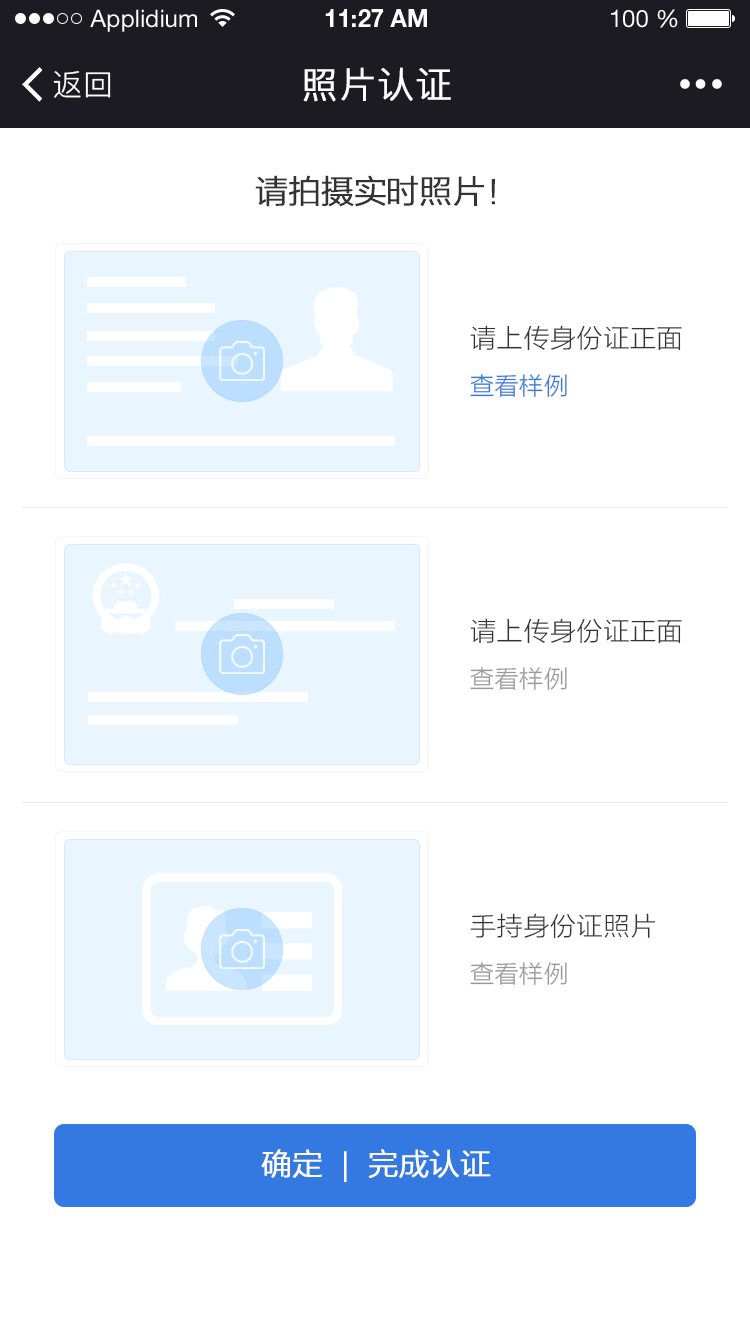
<style>
.page{position:relative;width:750px;height:1334px;background:#ffffff}
.page>*{position:absolute;margin:0}
.t1{font:24px "HelveticaNeueLTStd-Roman";color:#ffffff}
.t2{font:24px "HelveticaNeueLTStd-Bd";color:#ffffff}
.t3{font:30px "PingFang-SC-Regular";letter-spacing:0.025em;color:#ffffff}
.t4{font:36px "PingFang-SC-Regular";letter-spacing:0.025em;color:#ffffff;font-weight:bold}
.t5{font:32px "FZLTXHK--GBK1-0";color:#333333;font-weight:bold}
.t6{font:26px "FZLTXHK--GBK1-0";letter-spacing:0.025em;color:#333333}
.t7{font:24px "FZLTXHK--GBK1-0";letter-spacing:0.025em;color:#3479e1}
.t8{font:24px "FZLTXHK--GBK1-0";letter-spacing:0.025em;color:#999999}
.t9{font:30px "FZLTXHK--GBK1-0";color:#ffffff;font-weight:bold}
</style>
<div class="page">
<p class="t1" style="left:90px;top:9px;width:107px;height:23px">Applidium</p>
<p class="t2" style="left:325px;top:9px;width:102px;height:18px">11:27 AM</p>
<p class="t1" style="left:611px;top:9px;width:67px;height:19px">100 %</p>
<p class="t3" style="left:53px;top:71px;width:58px;height:27px">返回</p>
<p class="t4" style="left:303px;top:67px;width:148px;height:35px">照片认证</p>
<p class="t5" style="left:255px;top:175px;width:240px;height:32px">请拍摄实时照片！</p>
<p class="t6" style="left:470px;top:325px;width:212px;height:26px">请上传身份证正面</p>
<p class="t7" style="left:470px;top:374px;width:97px;height:23px">查看样例</p>
<p class="t6" style="left:470px;top:618px;width:212px;height:26px">请上传身份证正面</p>
<p class="t8" style="left:470px;top:667px;width:97px;height:23px">查看样例</p>
<p class="t6" style="left:470px;top:913px;width:185px;height:26px">手持身份证照片</p>
<p class="t8" style="left:470px;top:962px;width:97px;height:23px">查看样例</p>
<p class="t9" style="left:261px;top:1149px;width:230px;height:33px">确定  |  完成认证</p>
</div>
